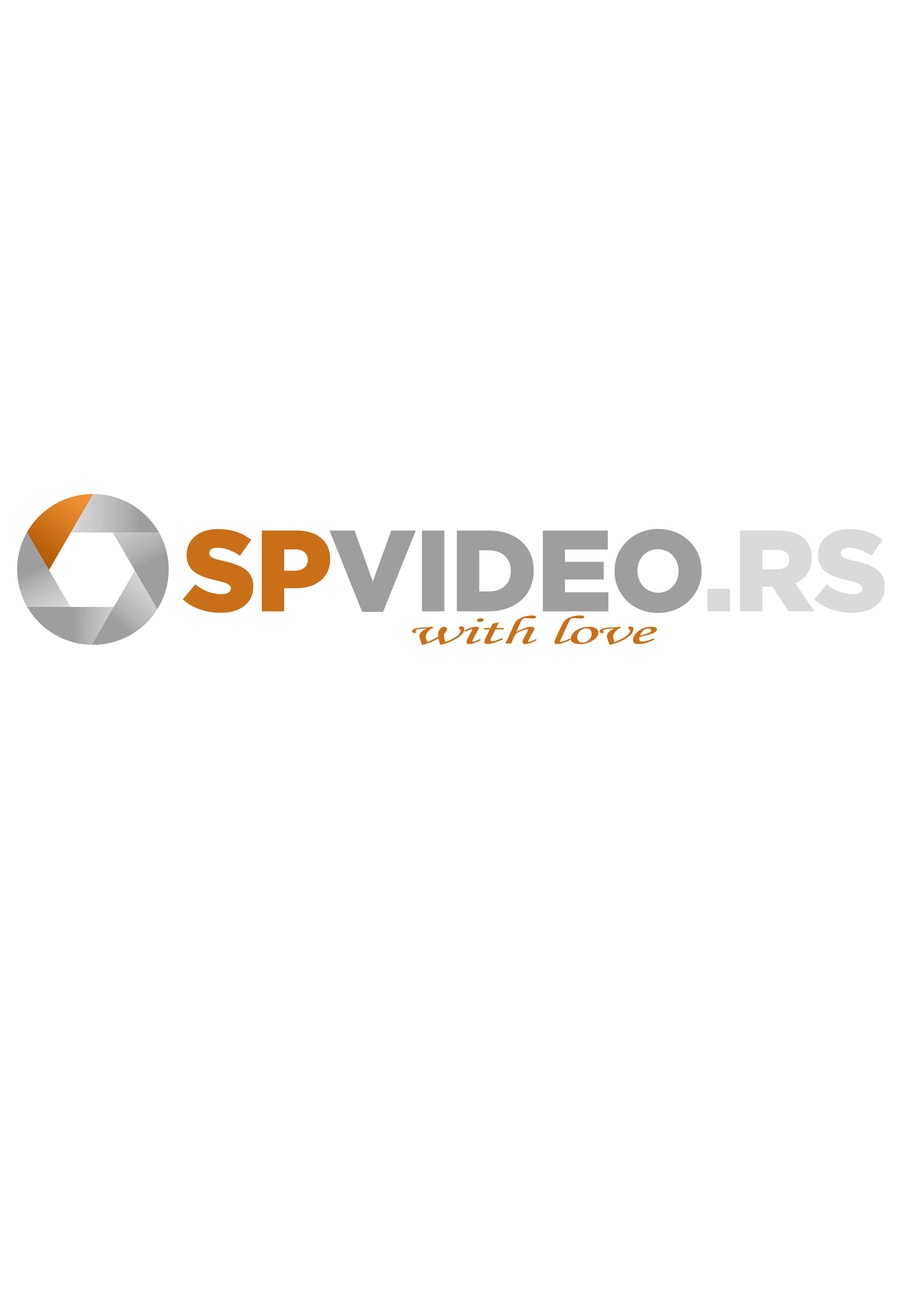
<style>
.page{position:relative;width:918px;height:1299px;background:#ffffff}
.page>*{position:absolute;margin:0}
.t1{font:115.4px "Gotham-Black";letter-spacing:-0.02em;color:#9e9e9e}
.t2{font:115.4px "Gotham-Black";letter-spacing:-0.02em;color:#c96f17}
.t3{font:115.4px "Gotham-Black";letter-spacing:-0.02em;color:#dadada}
.t4{font:40.7px "MonotypeCorsiva";letter-spacing:-0.02em;color:#c96f17;scale:1.92 1}
</style>
<div class="page">
<p class="t1" style="left:183px;top:529px;width:519px;height:84px"><span class="t2">SP</span>VIDEO</p>
<p class="t3" style="left:707px;top:529px;width:178px;height:84px">.RS</p>
<p class="t4" style="left:412px;top:615px;width:245px;height:30px">with love</p>
</div>
